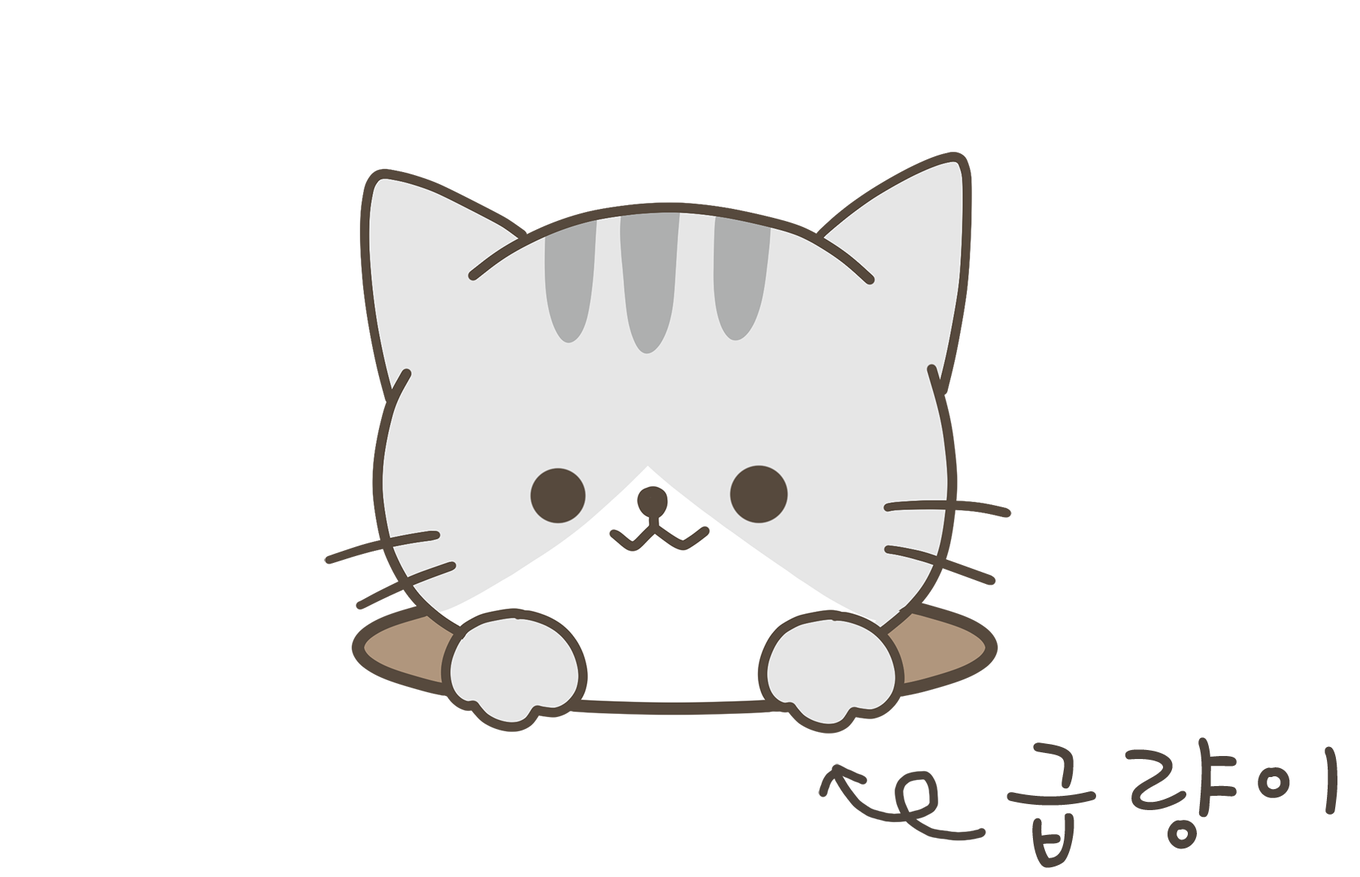
<style>
.page{position:relative;width:1360px;height:877px;background:#ffffff}
.page>*{position:absolute;margin:0}
.t1{font:153.5px "HiMelody-Regular";color:#4c433c}
</style>
<div class="page">
<p class="t1" style="left:1006px;top:737px;width:331px;height:131px">급량이</p>
</div>
